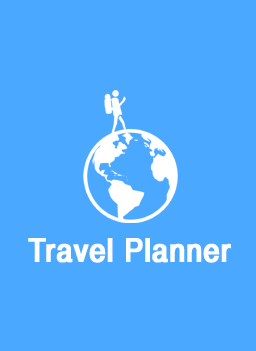
<style>
.page{position:relative;width:256px;height:351px;background:#4ba8ff}
.page>*{position:absolute;margin:0}
.t1{font:30.7px "YGO550";letter-spacing:-0.005em;color:#ffffff;font-weight:bold}
</style>
<div class="page">
<p class="t1" style="left:28px;top:238px;width:203px;height:25px">Travel Planner</p>
</div>
